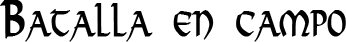
<style>
.page{position:relative;width:346px;height:42px;background:#ffffff}
.page>*{position:absolute;margin:0}
.t1{font:48px "Viking-Medium";color:#000000;font-variant:small-caps;font-weight:bold;scale:0.65 1}
</style>
<div class="page">
<p class="t1" style="left:0px;top:0px;width:346px;height:42px">Batalla en campo</p>
</div>
